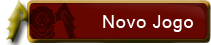
<style>
.page{position:relative;width:211px;height:45px;background:#650600}
.page>*{position:absolute;margin:0}
.t1{font:18px "MicrosoftSansSerif";letter-spacing:0.04em;color:#ffffff}
</style>
<div class="page">
<p class="t1" style="left:103px;top:15px;width:90px;height:17px">Novo Jogo</p>
</div>
